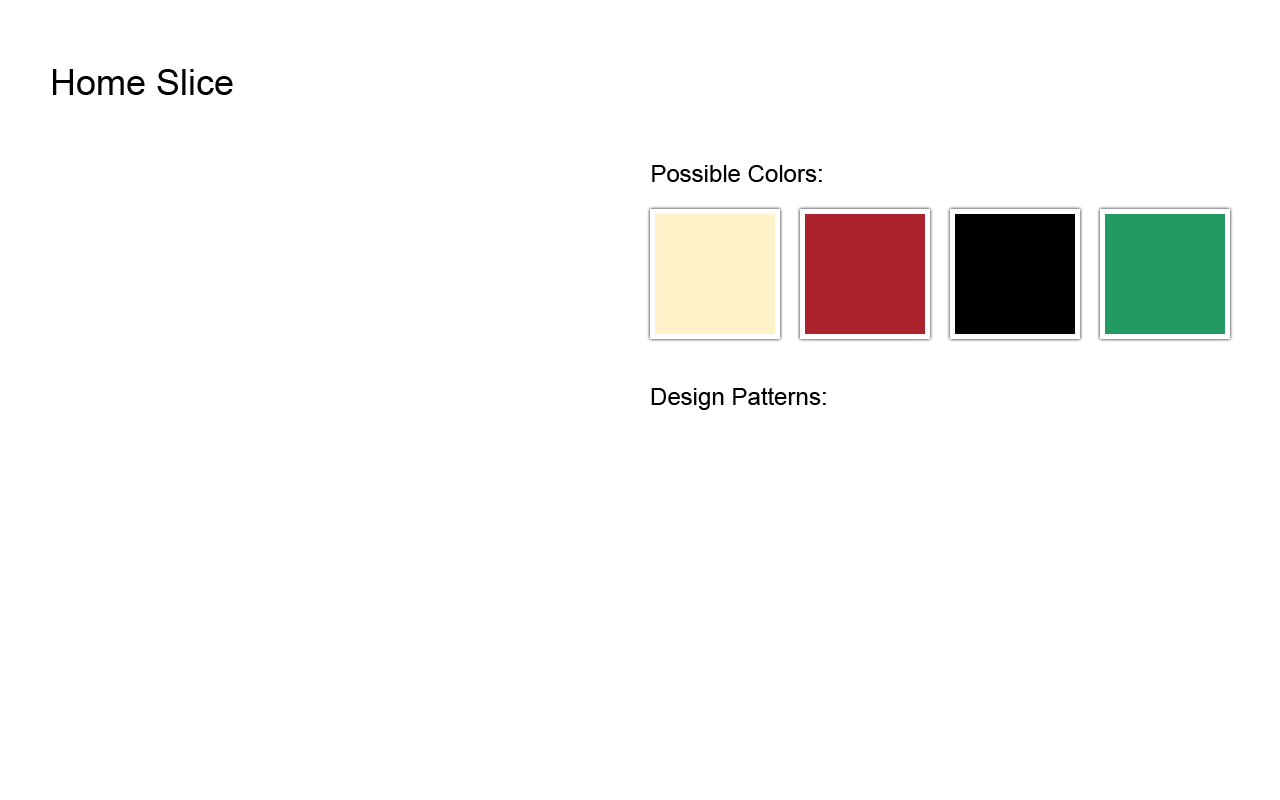
<style>
.page{position:relative;width:1280px;height:800px;background:#ffffff}
.page>*{position:absolute;margin:0}
.t1{font:36px "ArialMT";color:#000000}
.t2{font:24px "ArialMT";color:#000000}
</style>
<div class="page">
<p class="t1" style="left:53px;top:69px;width:180px;height:26px">Home Slice</p>
<p class="t2" style="left:652px;top:165px;width:170px;height:17px">Possible Colors:</p>
<p class="t2" style="left:651px;top:387px;width:175px;height:23px">Design Patterns:</p>
</div>
